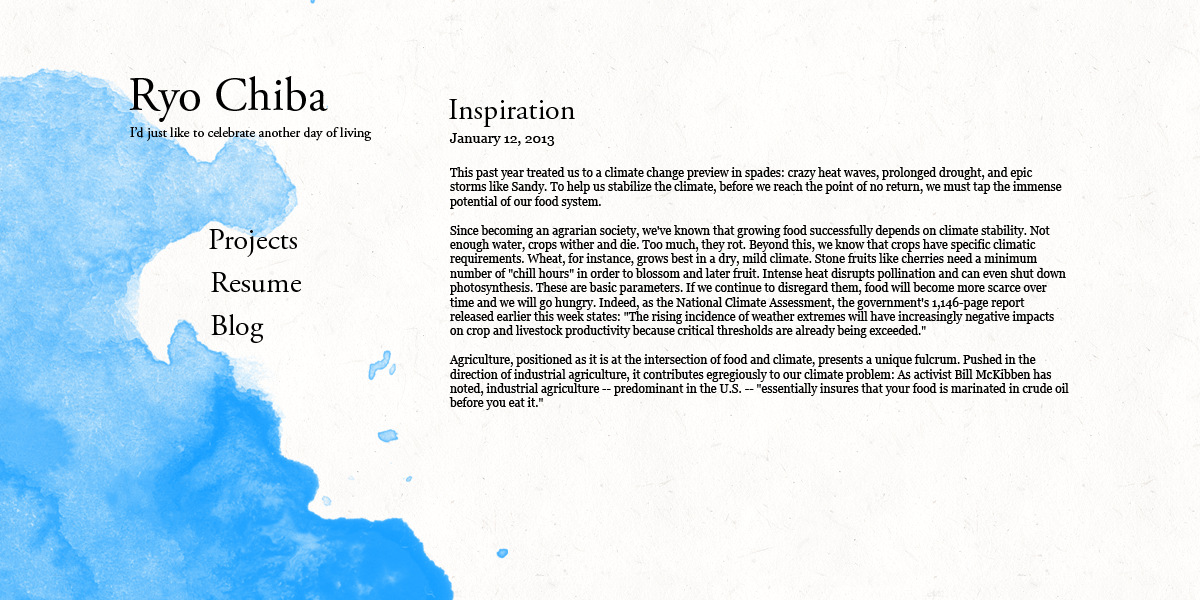
<style>
.page{position:relative;width:1200px;height:600px}
.page>*{position:absolute;margin:0}
.t1{font:48px "AGaramondPro-Regular";color:#000000}
.t2{font:30px "AGaramondPro-Regular";color:#000000}
.t3{font:14px "AGaramondPro-Regular";color:#000000}
.t4{font:14px "Georgia";color:#000000}
.t5{font:12px "Georgia";color:#000000}
</style>
<div class="page">
<p class="t1" style="left:129px;top:76px;width:199px;height:46px">Ryo Chiba</p>
<p class="t2" style="left:449px;top:99px;width:126px;height:28px">Inspiration</p>
<p class="t3" style="left:130px;top:127px;width:242px;height:14px">I’d just like to celebrate another day of living</p>
<p class="t4" style="left:449px;top:133px;width:106px;height:13px">January 12, 2013</p>
<p class="t5" style="left:449px;top:167px;width:620px;height:243px">This past year treated us to a climate change preview in spades: crazy heat waves, prolonged drought, and epic storms like Sandy. To help us stabilize the climate, before we reach the point of no return, we must tap the immense potential of our food system.<br><br>Since becoming an agrarian society, we've known that growing food successfully depends on climate stability. Not enough water, crops wither and die. Too much, they rot. Beyond this, we know that crops have specific climatic requirements. Wheat, for instance, grows best in a dry, mild climate. Stone fruits like cherries need a minimum number of "chill hours" in order to blossom and later fruit. Intense heat disrupts pollination and can even shut down photosynthesis. These are basic parameters. If we continue to disregard them, food will become more scarce over time and we will go hungry. Indeed, as the National Climate Assessment, the government's 1,146-page report released earlier this week states: "The rising incidence of weather extremes will have increasingly negative impacts on crop and livestock productivity because critical thresholds are already being exceeded."<br><br>Agriculture, positioned as it is at the intersection of food and climate, presents a unique fulcrum. Pushed in the direction of industrial agriculture, it contributes egregiously to our climate problem: As activist Bill McKibben has noted, industrial agriculture -- predominant in the U.S. -- "essentially insures that your food is marinated in crude oil before you eat it."</p>
<p class="t2" style="left:209px;top:229px;width:88px;height:28px">Projects</p>
<p class="t2" style="left:211px;top:272px;width:90px;height:21px">Resume</p>
<p class="t2" style="left:211px;top:314px;width:53px;height:29px">Blog</p>
</div>
